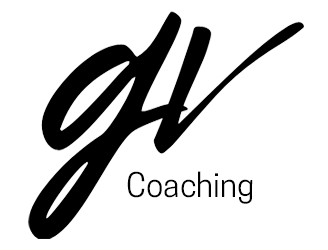
<style>
.page{position:relative;width:328px;height:250px;background:#ffffff}
.page>*{position:absolute;margin:0}
.t1{font:32px "CooperHewitt-Book";color:#000000}
</style>
<div class="page">
<p class="t1" style="left:127px;top:171px;width:126px;height:33px">Coaching</p>
</div>
